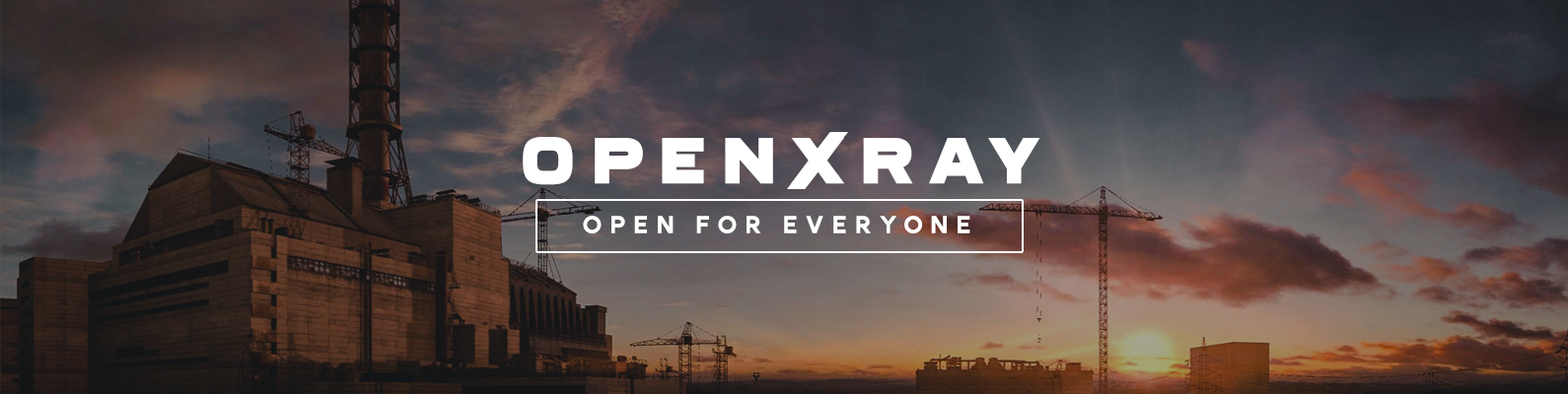
<style>
.page{position:relative;width:1568px;height:394px}
.page>*{position:absolute;margin:0}
.t1{font:64.7px "Ferry-Black";letter-spacing:0.25em;color:#ffffff;text-transform:uppercase}
.t2{font:24.2px "FruitBox-Regular";letter-spacing:0.25em;color:#ffffff;text-transform:uppercase}
</style>
<div class="page">
<p class="t1" style="left:523px;top:137px;width:517px;height:48px">OpenXRay</p>
<p class="t2" style="left:583px;top:216px;width:387px;height:18px">OPEN FOR EVERYONE</p>
</div>
